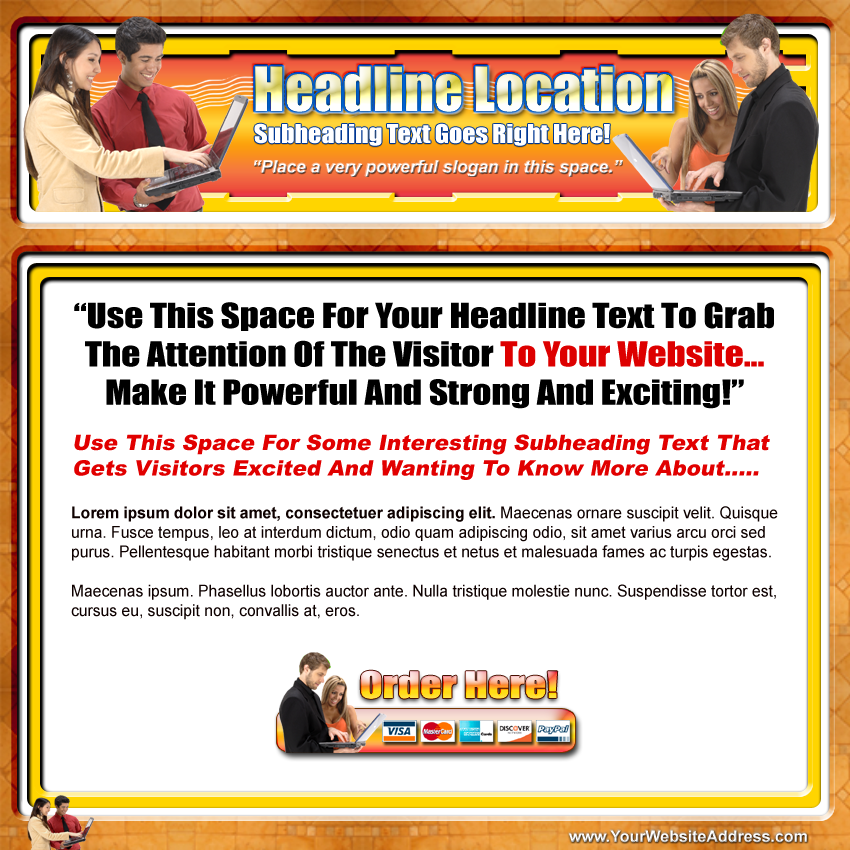
<style>
.page{position:relative;width:850px;height:850px;background:#ffffff}
.page>*{position:absolute;margin:0}
.t1{font:56.2px "Impact"}
.t2{font:24px "Impact";color:#ffffff;scale:1.08 1}
.t3{font:17.3px "Arial-BoldItalicMT"}
.t4{font:32px "Impact";color:#000000;scale:1.16 1}
.t5{font:32px "Impact";color:#dd0000;scale:1.16 1}
.t6{font:21.3px "Arial-Black";color:#e10000;font-style:italic}
.t7{font:16.3px "ArialMT";color:#0e0100;scale:0.96 1}
.t8{font:16.3px "Arial-BoldMT";color:#0e0100;scale:0.96 1}
.t9{font:33.6px "Impact";scale:1.26 1}
.t10{font:16px "Arial-BoldMT";color:#ffffff}
</style>
<div class="page">
<p class="t1" style="left:255px;top:66px;width:418px;height:46px">Headline Location</p>
<p class="t1" style="left:255px;top:66px;width:418px;height:46px">Headline Location</p>
<p class="t2" style="left:254px;top:123px;width:356px;height:23px">Subheading Text Goes Right Here!</p>
<p class="t3" style="left:254px;top:160px;width:369px;height:17px">“Place a very powerful slogan in this space.”</p>
<p class="t4" style="left:74px;top:302px;width:700px;height:107px;text-align:center">“Use This Space For Your Headline Text To Grab<br>The Attention Of The Visitor<span class="t5"> To Your Website...<br></span>Make It Powerful And Strong And Exciting!”</p>
<p class="t6" style="left:74px;top:434px;width:696px;height:46px">Use This Space For Some Interesting Subheading Text That<br>Gets Visitors Excited And Wanting To Know More About.....</p>
<p class="t7" style="left:71px;top:506px;width:707px;height:114px"><span class="t8">Lorem ipsum dolor sit amet, consectetuer adipiscing elit.</span> Maecenas ornare suscipit velit. Quisque<br>urna. Fusce tempus, leo at interdum dictum, odio quam adipiscing odio, sit amet varius arcu orci sed<br>purus. Pellentesque habitant morbi tristique senectus et netus et malesuada fames ac turpis egestas.<br><br>Maecenas ipsum. Phasellus lobortis auctor ante. Nulla tristique molestie nunc. Suspendisse tortor est,<br>cursus eu, suscipit non, convallis at, eros.</p>
<p class="t9" style="left:360px;top:670px;width:198px;height:29px">Order Here!</p>
<p class="t9" style="left:360px;top:670px;width:198px;height:29px">Order Here!</p>
<p class="t10" style="left:569px;top:830px;width:238px;height:13px">www.YourWebsiteAddress.com</p>
</div>
